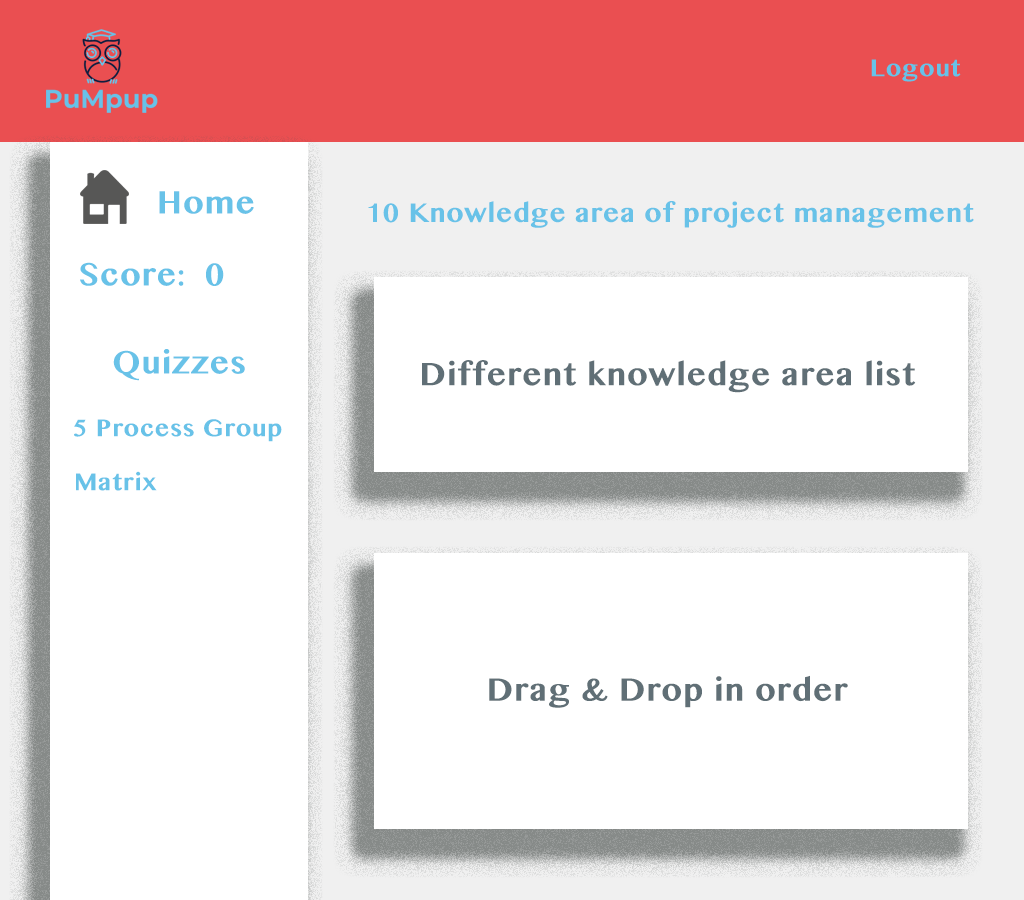
<style>
.page{position:relative;width:1024px;height:900px;background:#ffffff}
.page>*{position:absolute;margin:0}
.t1{font:32px "GurmukhiMN-Bold";letter-spacing:0.03em;color:#68c2e8}
.t2{font:26.7px "GurmukhiMN-Bold";letter-spacing:0.03em;color:#68c2e8}
.t3{font:32px "GurmukhiMN-Bold";letter-spacing:0.03em;color:#606f76}
.t4{font:24px "GurmukhiMN-Bold";letter-spacing:0.03em;color:#68c2e8}
</style>
<div class="page">
<p class="t1" style="left:159px;top:191px;width:95px;height:23px">Home</p>
<p class="t2" style="left:368px;top:201px;width:606px;height:27px">10 Knowledge area of project management</p>
<p class="t1" style="left:80px;top:262px;width:144px;height:24px">Score:  0</p>
<p class="t1" style="left:113px;top:349px;width:132px;height:32px">Quizzes</p>
<p class="t3" style="left:422px;top:360px;width:494px;height:33px">Different knowledge area list</p>
<p class="t4" style="left:74px;top:419px;width:208px;height:23px">5 Process Group</p>
<p class="t4" style="left:76px;top:471px;width:81px;height:20px">Matrix</p>
<p class="t3" style="left:489px;top:675px;width:359px;height:33px">Drag &amp; Drop in order</p>
</div>
